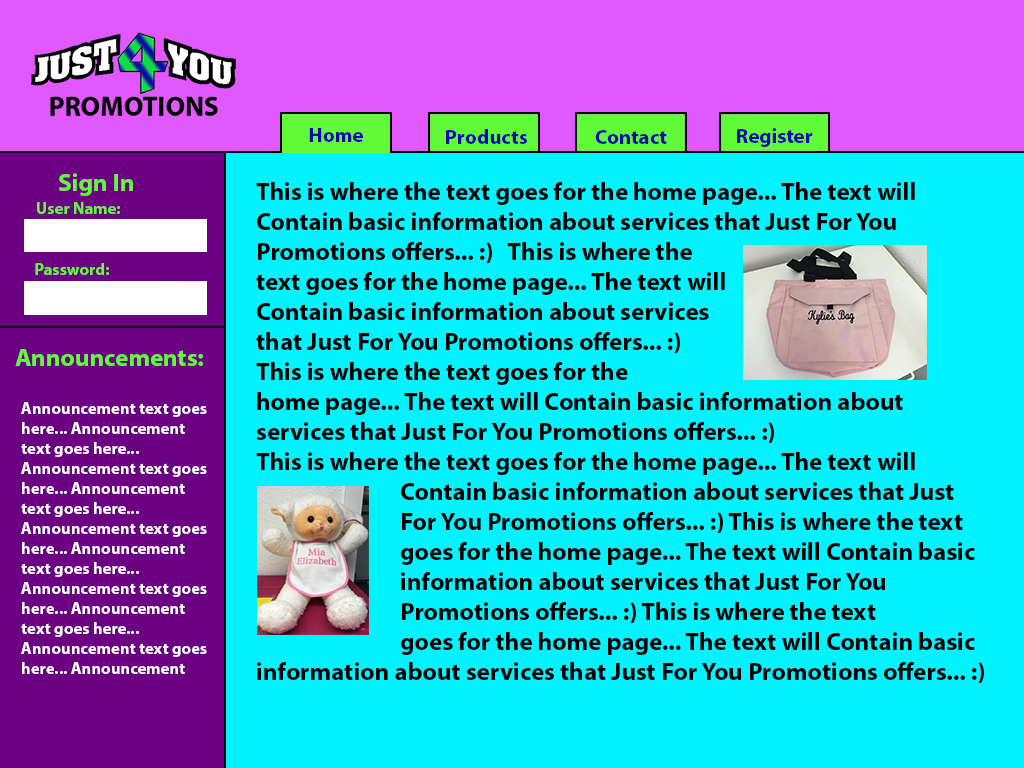
<style>
.page{position:relative;width:1024px;height:768px;background:#00f3ff}
.page>*{position:absolute;margin:0}
.t1{font:20.8px "MyriadPro-Bold";color:#0f08af}
.t2{font:25px "MyriadPro-Bold";color:#62fb39}
.t3{font:25px "MyriadPro-Bold";color:#000000}
.t4{font:16.7px "MyriadPro-Bold";color:#62fb39}
.t5{font:16.7px "MyriadPro-Bold";color:#ffffff}
</style>
<div class="page">
<p class="t1" style="left:309px;top:128px;width:54px;height:14px">Home</p>
<p class="t1" style="left:446px;top:129px;width:81px;height:15px">Products</p>
<p class="t1" style="left:595px;top:130px;width:72px;height:14px">Contact</p>
<p class="t1" style="left:737px;top:128px;width:76px;height:19px">Register</p>
<p class="t2" style="left:59px;top:173px;width:74px;height:23px">Sign In</p>
<p class="t3" style="left:256px;top:182px;width:728px;height:501px">This is where the text goes for the home page... The text will <br>Contain basic information about services that Just For You <br>Promotions offers... :)   This is where the <br>text goes for the home page... The text will <br>Contain basic information about services <br>that Just For You Promotions offers... :) <br>This is where the text goes for the <br>home page... The text will Contain basic information about <br>services that Just For You Promotions offers... :) <br>This is where the text goes for the home page... The text will <br>    Contain basic information about services that Just <br>    For You Promotions offers... :) This is where the text <br>    goes for the home page... The text will Contain basic <br>    information about services that Just For You <br>    Promotions offers... :) This is where the text <br>    goes for the home page... The text will Contain basic <br>information about services that Just For You Promotions offers... :)</p>
<p class="t4" style="left:37px;top:202px;width:83px;height:12px">User Name:</p>
<p class="t4" style="left:35px;top:263px;width:74px;height:12px">Password:</p>
<p class="t2" style="left:15px;top:349px;width:188px;height:17px">Announcements:</p>
<p class="t5" style="left:21px;top:402px;width:186px;height:272px">Announcement text goes <br>here... Announcement <br>text goes here... <br>Announcement text goes <br>here... Announcement <br>text goes here... <br>Announcement text goes <br>here... Announcement <br>text goes here... <br>Announcement text goes <br>here... Announcement <br>text goes here... <br>Announcement text goes <br>here... Announcement</p>
</div>
